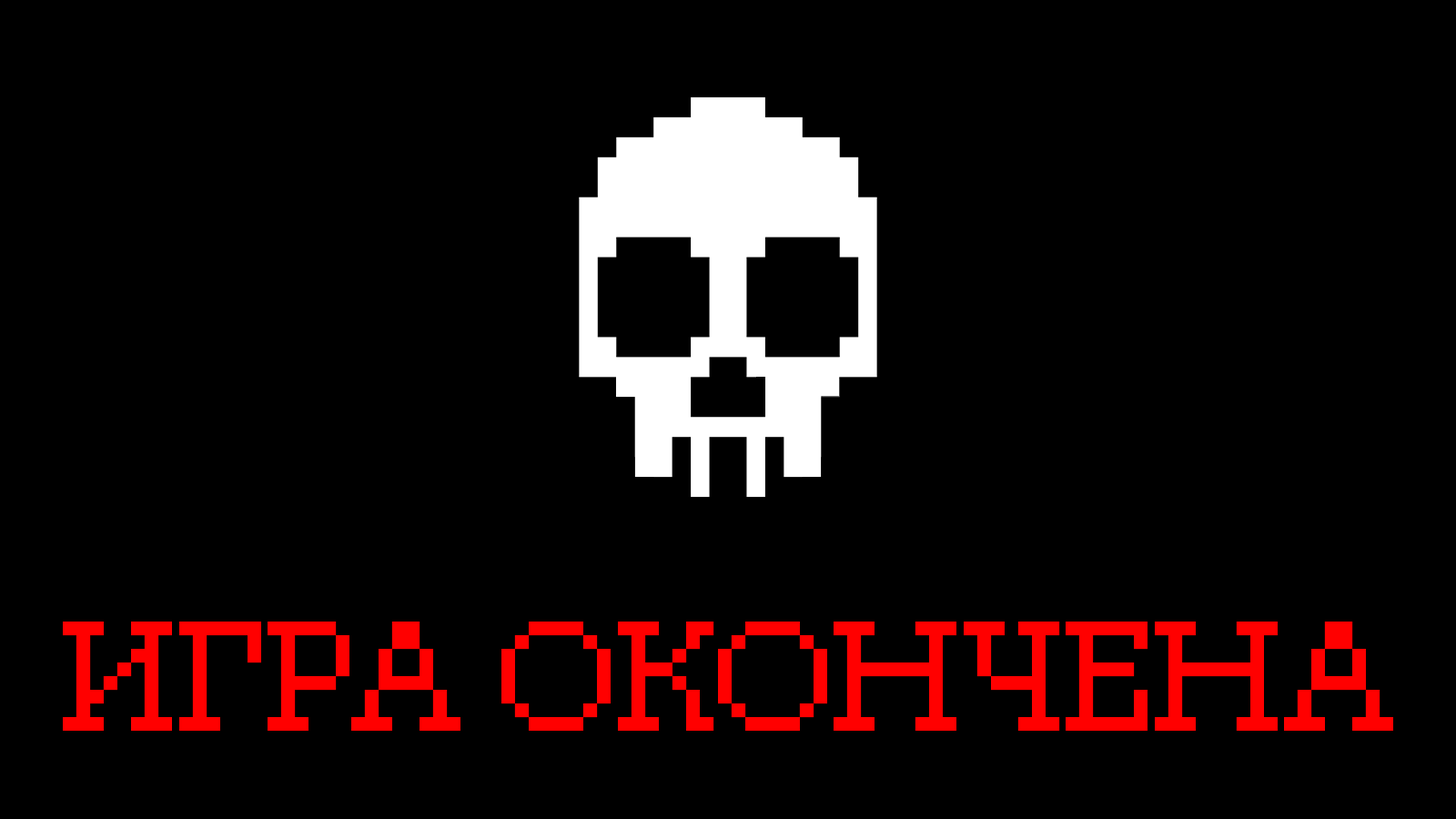
<style>
.page{position:relative;width:1456px;height:819px;background:#000000}
.page>*{position:absolute;margin:0}
.t1{font:136.5px "PixelGeorgia";letter-spacing:-0.05em;color:#ff0000}
</style>
<div class="page">
<p class="t1" style="left:63px;top:622px;width:1330px;height:109px">ИГРА ОКОНЧЕНА</p>
</div>
